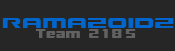
<style>
.page{position:relative;width:175px;height:51px;background:#262626}
.page>*{position:absolute;margin:0}
.t1{font:15.8px "Gunship";color:#0066cc;scale:1.22 1}
.t2{font:13.3px "SFTransRobotics";color:#626262;scale:1.22 1}
</style>
<div class="page">
<p class="t1" style="left:2px;top:18px;width:172px;height:10px">ramazoidz</p>
<p class="t2" style="left:36px;top:29px;width:100px;height:9px">Team 2185</p>
</div>
